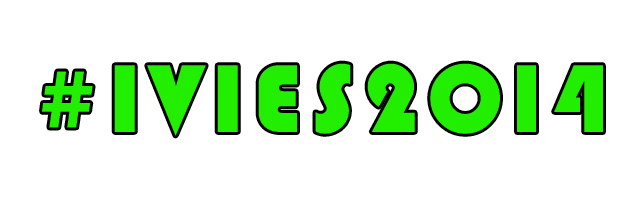
<style>
.page{position:relative;width:640px;height:197px;background:#ffffff}
.page>*{position:absolute;margin:0}
.t1{font:100px "Blippo-Heavy";letter-spacing:0.075em;color:#22ee00}
</style>
<div class="page">
<p class="t1" style="left:42px;top:63px;width:561px;height:73px">#IVIES2014</p>
</div>
